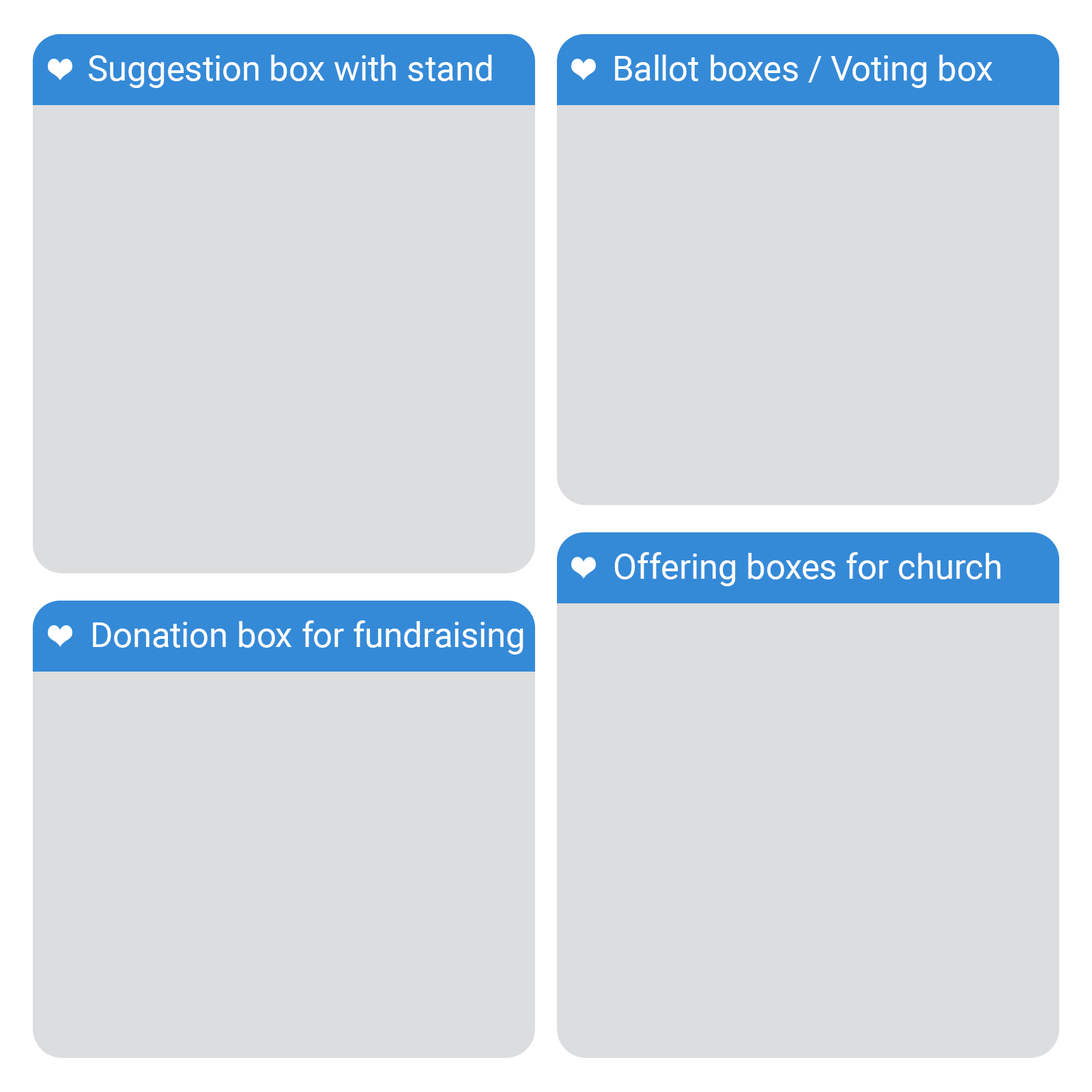
<style>
.page{position:relative;width:1092px;height:1092px;background:#dcdddf}
.page>*{position:absolute;margin:0}
.t1{font:34.9px "Roboto-Regular";color:#ffffff}
</style>
<div class="page">
<p class="t1" style="left:89px;top:55px;width:403px;height:33px">Suggestion box with stand</p>
<p class="t1" style="left:615px;top:55px;width:378px;height:33px">Ballot boxes / Voting box</p>
<p class="t1" style="left:614px;top:552px;width:387px;height:34px">Offering boxes for church</p>
<p class="t1" style="left:93px;top:620px;width:430px;height:35px">Donation box for fundraising</p>
</div>
